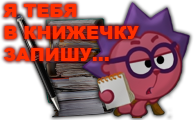
<style>
.page{position:relative;width:195px;height:120px;background:#ffffff}
.page>*{position:absolute;margin:0}
.t1{font:18px "Arial-Black";color:#ff3000}
</style>
<div class="page">
<p class="t1" style="left:3px;top:4px;width:136px;height:57px">Я ТЕБЯ <br>В КНИЖЕЧКУ<br>ЗАПИШУ...</p>
</div>
